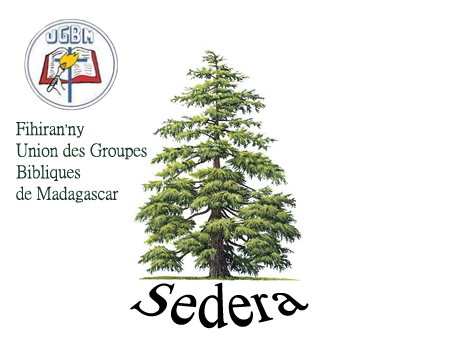
<style>
.page{position:relative;width:454px;height:340px;background:#ffffff}
.page>*{position:absolute;margin:0}
.t1{font:18px "PMingLiU-ExtB";color:#143823}
.t2{font:18px "Utsaah";color:#143823}
.t3{font:48px "TimesNewRomanPSMT";color:#000000}
</style>
<div class="page">
<p class="t1" style="left:16px;top:121px;width:131px;height:82px">Fihiran<span class="t2">’</span>ny <br>Union des Groupes <br>Bibliques<br>de Madagascar</p>
<p class="t3" style="left:130px;top:282px;width:179px;height:47px">Sedera</p>
</div>
